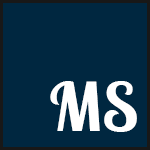
<style>
.page{position:relative;width:150px;height:150px;background:#002740}
.page>*{position:absolute;margin:0}
.t1{font:66.7px "LobsterTwo-Bold";color:#ffffff}
</style>
<div class="page">
<p class="t1" style="left:50px;top:81px;width:87px;height:51px">MS</p>
</div>
